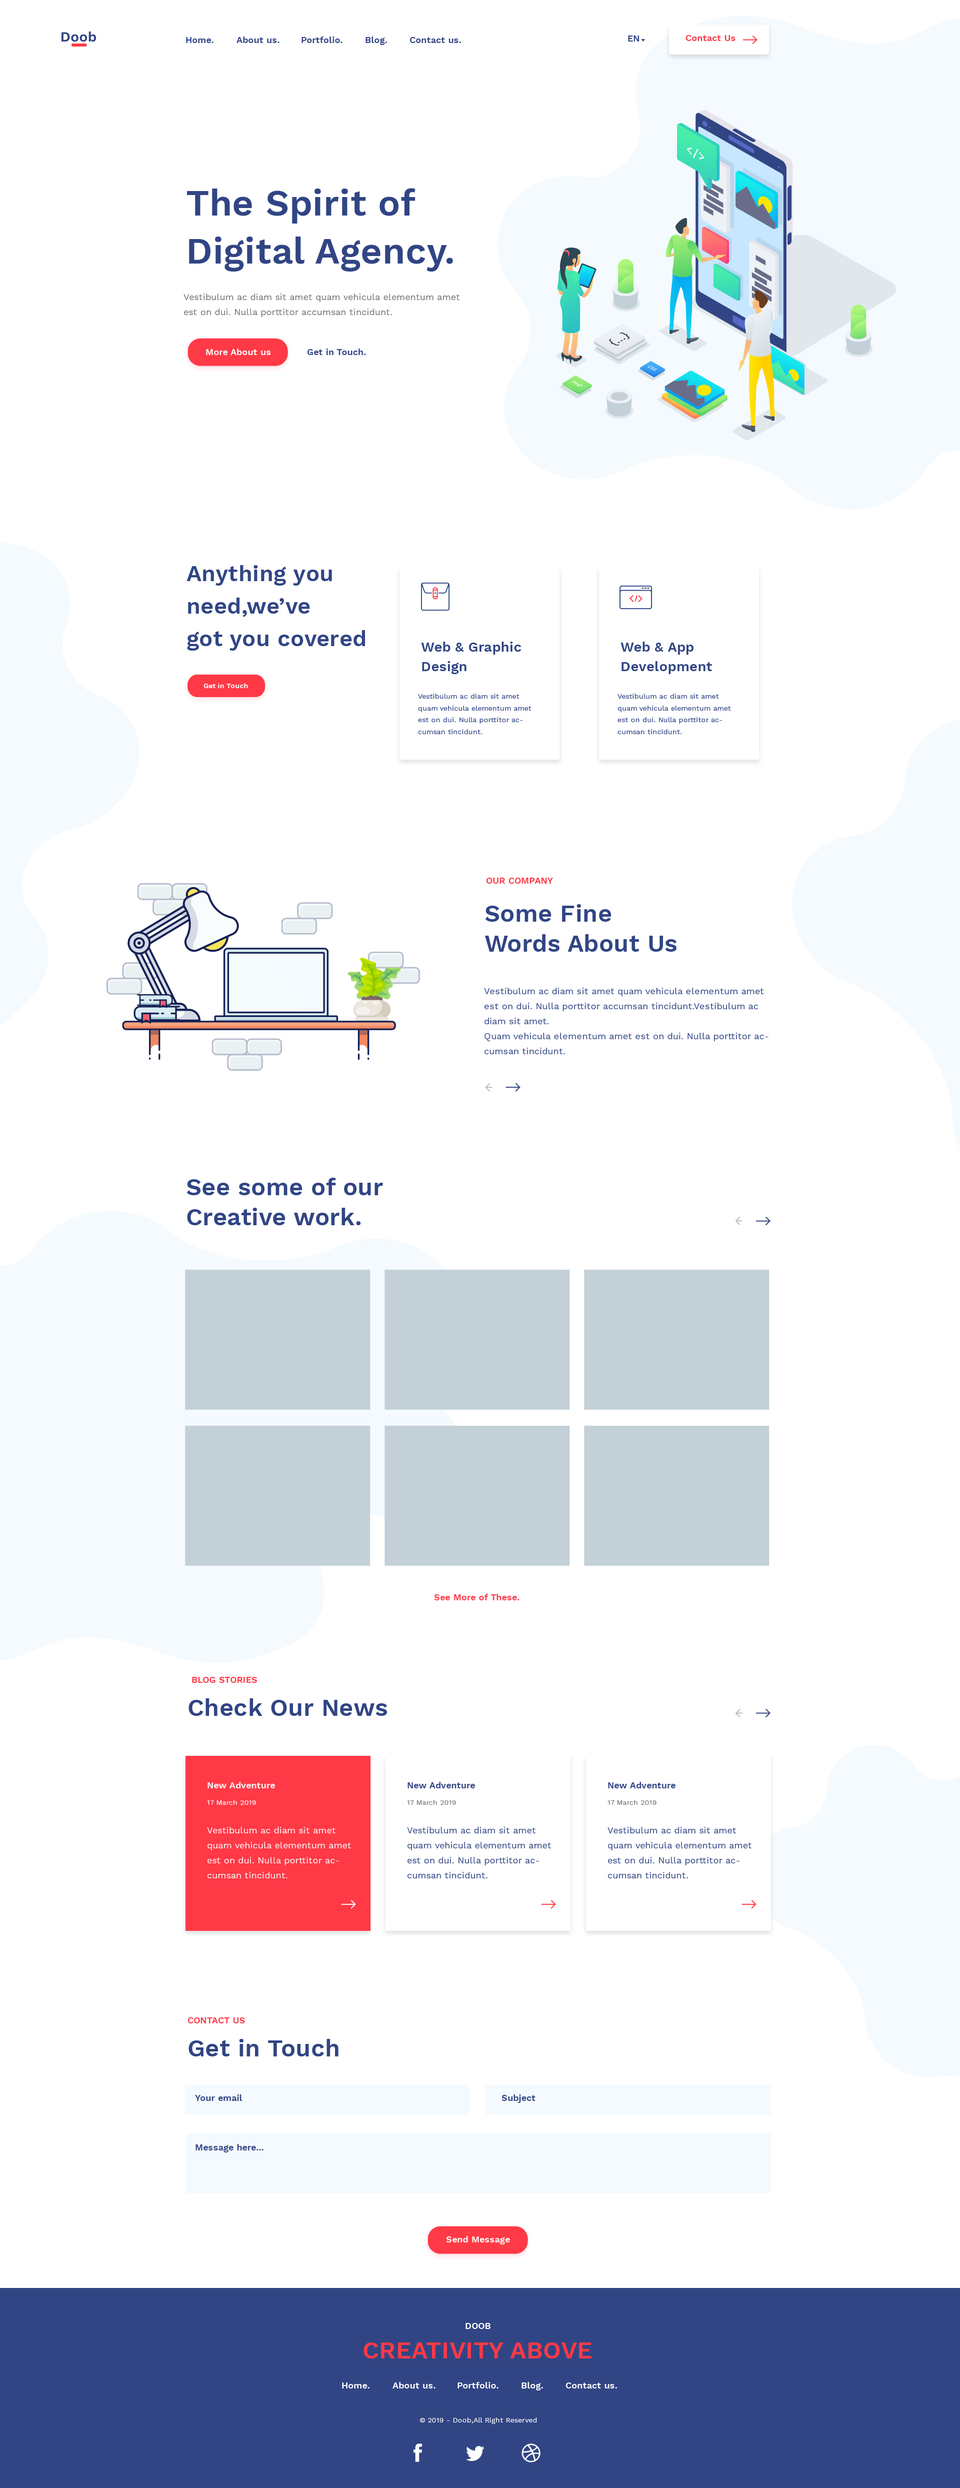
<style>
.page{position:relative;width:960px;height:2488px;background:#ffffff}
.page>*{position:absolute;margin:0}
.t1{font:9px "WorkSans-SemiBold";letter-spacing:0.01em;color:#314584}
.t2{font:9px "WorkSans-SemiBold";letter-spacing:0.01em;color:#ff3946}
.t3{font:36.7px/47.8px "WorkSans-SemiBold";letter-spacing:0.01em;color:#314584}
.t4{font:9px/15px "WorkSans-Regular";letter-spacing:0.01em;color:#6e757a}
.t5{font:9px "WorkSans-SemiBold";letter-spacing:0.01em;color:#ffffff}
.t6{font:22.5px/32.5px "WorkSans-SemiBold";letter-spacing:0.01em;color:#314584}
.t7{font:13.7px/19.6px "WorkSans-SemiBold";letter-spacing:0.01em;color:#314584}
.t8{font:7.1px "WorkSans-SemiBold";letter-spacing:0.01em;color:#ffffff}
.t9{font:7.1px/11.8px "WorkSans-Regular";letter-spacing:0.01em;color:#314584}
.t10{font:24.2px/30px "WorkSans-SemiBold";letter-spacing:0.01em;color:#314584}
.t11{font:9px/15px "WorkSans-Regular";letter-spacing:0.01em;color:#314584}
.t12{font:24.2px "WorkSans-SemiBold";letter-spacing:0.01em;color:#314584}
.t13{font:7px "WorkSans-Regular";letter-spacing:0.01em;color:#ffffff}
.t14{font:7px "WorkSans-Regular";letter-spacing:0.01em;color:#6e757a}
.t15{font:9px/15px "WorkSans-Regular";letter-spacing:0.01em;color:#ffffff}
.t16{font:24.2px "WorkSans-SemiBold";letter-spacing:0.01em;color:#ff3946}
</style>
<div class="page">
<p class="t1" style="left:186px;top:37px;width:28px;height:6px">Home.</p>
<p class="t1" style="left:236px;top:36px;width:44px;height:7px">About us.</p>
<p class="t1" style="left:302px;top:36px;width:40px;height:7px">Portfolio.</p>
<p class="t1" style="left:366px;top:36px;width:21px;height:9px">Blog.</p>
<p class="t1" style="left:410px;top:37px;width:51px;height:6px">Contact us.</p>
<p class="t1" style="left:628px;top:36px;width:11px;height:6px">EN</p>
<p class="t2" style="left:686px;top:35px;width:50px;height:6px">Contact Us</p>
<p class="t3" style="left:187px;top:188px;width:266px;height:84px">The Spirit of <br>Digital Agency.</p>
<p class="t4" style="left:184px;top:294px;width:276px;height:23px">Vestibulum ac diam sit amet quam vehicula elementum amet est on dui. Nulla porttitor accumsan tincidunt.</p>
<p class="t5" style="left:206px;top:348px;width:65px;height:7px">More About us</p>
<p class="t1" style="left:308px;top:348px;width:58px;height:7px">Get in Touch.</p>
<p class="t6" style="left:186px;top:565px;width:179px;height:85px">Anything you <br>need,we’ve <br>got you covered</p>
<p class="t7" style="left:421px;top:642px;width:101px;height:32px">Web &amp; Graphic <br>Design</p>
<p class="t7" style="left:620px;top:642px;width:92px;height:32px">Web &amp; App<br>Development</p>
<p class="t8" style="left:204px;top:683px;width:44px;height:5px">Get in Touch</p>
<p class="t9" style="left:418px;top:694px;width:114px;height:40px">Vestibulum ac diam sit amet quam vehicula elementum amet est on dui. Nulla porttitor accumsan tincidunt.</p>
<p class="t9" style="left:618px;top:694px;width:113px;height:40px">Vestibulum ac diam sit amet quam vehicula elementum amet est on dui. Nulla porttitor accumsan tincidunt.</p>
<p class="t2" style="left:486px;top:878px;width:67px;height:6px">OUR COMPANY</p>
<p class="t10" style="left:484px;top:904px;width:192px;height:48px">Some Fine<br>Words About Us</p>
<p class="t11" style="left:484px;top:988px;width:284px;height:66px">Vestibulum ac diam sit amet quam vehicula elementum amet est on dui. Nulla porttitor accumsan tincidunt.Vestibulum ac diam sit amet.<br>Quam vehicula elementum amet est on dui. Nulla porttitor accumsan tincidunt.</p>
<p class="t10" style="left:186px;top:1178px;width:197px;height:47px">See some of our<br>Creative work.</p>
<p class="t2" style="left:434px;top:1594px;width:86px;height:6px">See More of These.</p>
<p class="t2" style="left:192px;top:1676px;width:65px;height:6px">BLOG STORIES</p>
<p class="t12" style="left:188px;top:1698px;width:199px;height:18px">Check Our News</p>
<p class="t5" style="left:208px;top:1782px;width:67px;height:6px">New Adventure</p>
<p class="t1" style="left:408px;top:1782px;width:67px;height:6px">New Adventure</p>
<p class="t1" style="left:608px;top:1782px;width:68px;height:6px">New Adventure</p>
<p class="t13" style="left:207px;top:1800px;width:49px;height:4px">17 March 2019</p>
<p class="t14" style="left:407px;top:1800px;width:49px;height:4px">17 March 2019</p>
<p class="t14" style="left:608px;top:1800px;width:48px;height:4px">17 March 2019</p>
<p class="t15" style="left:207px;top:1826px;width:144px;height:52px">Vestibulum ac diam sit amet quam vehicula elementum amet est on dui. Nulla porttitor accumsan tincidunt.</p>
<p class="t11" style="left:407px;top:1826px;width:144px;height:52px">Vestibulum ac diam sit amet quam vehicula elementum amet est on dui. Nulla porttitor accumsan tincidunt.</p>
<p class="t11" style="left:608px;top:1826px;width:144px;height:52px">Vestibulum ac diam sit amet quam vehicula elementum amet est on dui. Nulla porttitor accumsan tincidunt.</p>
<p class="t2" style="left:188px;top:2017px;width:57px;height:6px">CONTACT US</p>
<p class="t12" style="left:188px;top:2038px;width:150px;height:18px">Get in Touch</p>
<p class="t1" style="left:195px;top:2094px;width:47px;height:6px">Your email</p>
<p class="t1" style="left:502px;top:2094px;width:34px;height:8px">Subject</p>
<p class="t1" style="left:196px;top:2144px;width:68px;height:8px">Message here...</p>
<p class="t5" style="left:446px;top:2236px;width:64px;height:8px">Send Message</p>
<p class="t5" style="left:466px;top:2322px;width:24px;height:6px">DOOB</p>
<p class="t16" style="left:364px;top:2342px;width:228px;height:16px">CREATIVITY ABOVE</p>
<p class="t5" style="left:342px;top:2382px;width:28px;height:6px">Home.</p>
<p class="t5" style="left:392px;top:2382px;width:44px;height:6px">About us.</p>
<p class="t5" style="left:458px;top:2382px;width:40px;height:6px">Portfolio.</p>
<p class="t5" style="left:522px;top:2382px;width:21px;height:8px">Blog.</p>
<p class="t5" style="left:566px;top:2382px;width:51px;height:6px">Contact us.</p>
<p class="t13" style="left:420px;top:2417px;width:117px;height:7px">© 2019 - Doob,All Right Reserved</p>
</div>
